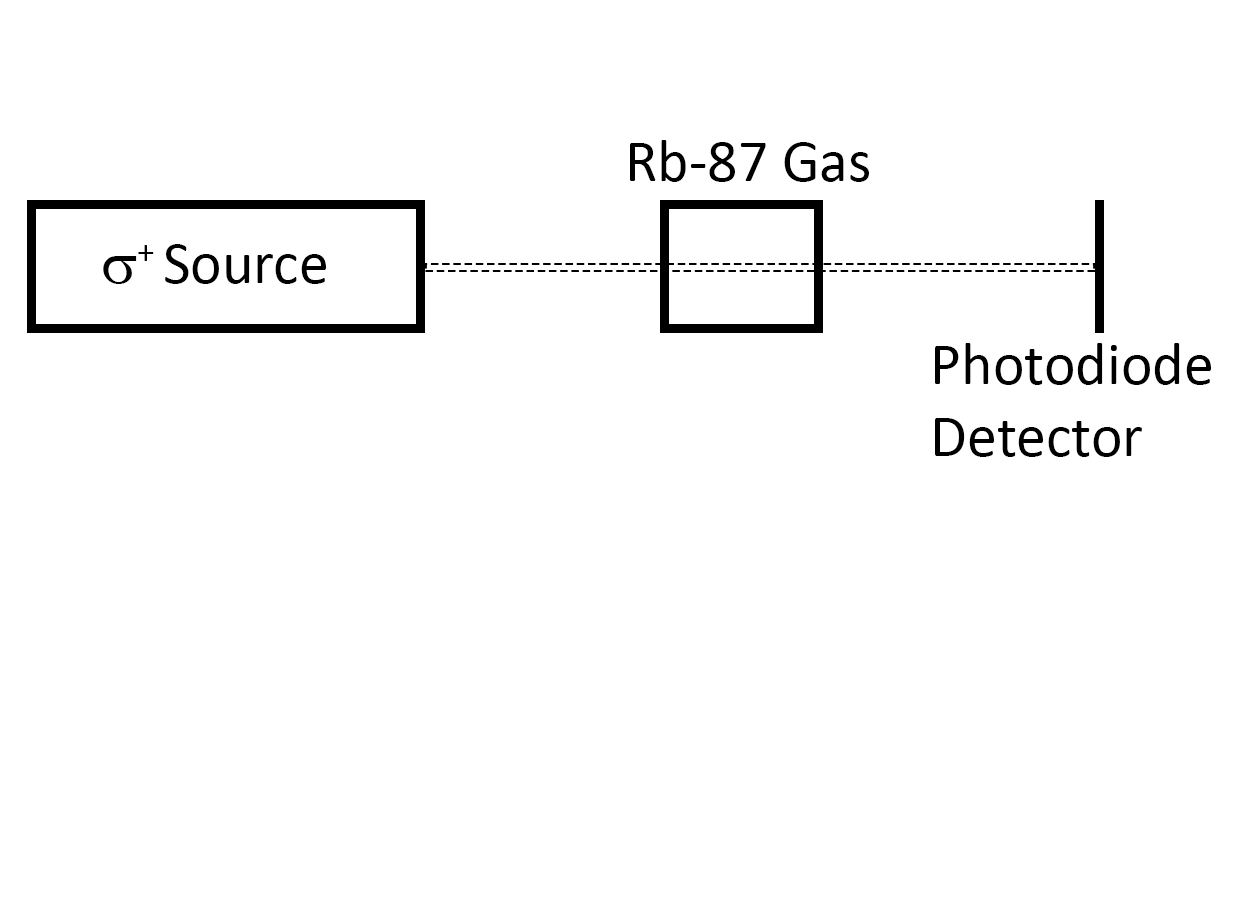
<style>
.page{position:relative;width:1234px;height:921px;background:#ffffff}
.page>*{position:absolute;margin:0}
.t1{font:60px "Calibri";color:#000000}
.t2{font:60px "SymbolMT";color:#000000}
</style>
<div class="page">
<p class="t1" style="left:630px;top:140px;width:239px;height:42px">Rb-87 Gas</p>
<p class="t1" style="left:103px;top:244px;width:223px;height:40px"><span class="t2">s</span>+ Source</p>
<p class="t1" style="left:935px;top:343px;width:276px;height:114px">Photodiode<br>Detector</p>
</div>
